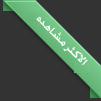
<style>
.page{position:relative;width:101px;height:101px;background:#333333}
.page>*{position:absolute;margin:0}
.t1{font:14px "BrushScriptStd";color:#ffffff}
</style>
<div class="page">
<p class="t1" style="left:36px;top:16px;width:52px;height:49px;rotate:45deg">الاكثر مشاهده</p>
</div>
